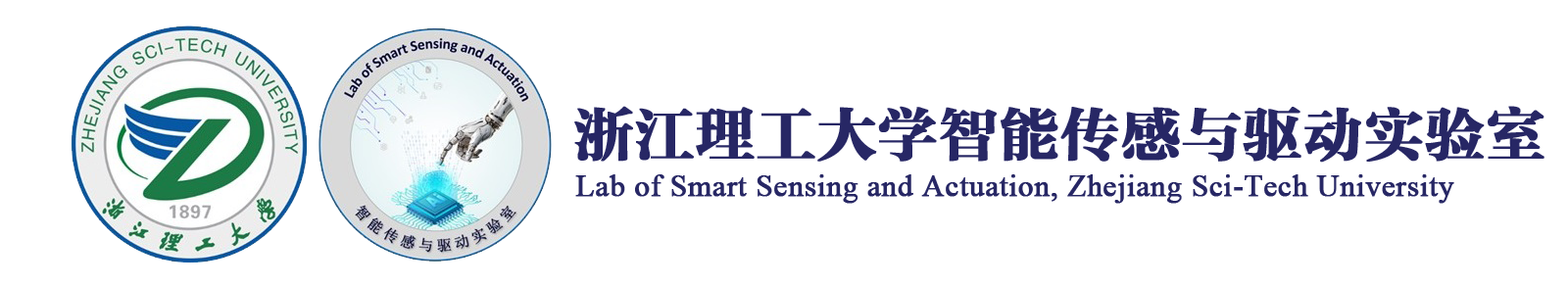
<style>
.page{position:relative;width:1568px;height:286px;background:#ffffff}
.page>*{position:absolute;margin:0}
.t1{font:59.2px "FZCYSK--GBK1-0";color:#272765;font-weight:bold}
.t2{font:30.6px "TimesNewRomanPSMT";color:#272765;font-weight:bold}
</style>
<div class="page">
<p class="t1" style="left:574px;top:106px;width:970px;height:57px">浙江理工大学智能传感与驱动实验室</p>
<p class="t2" style="left:575px;top:174px;width:879px;height:30px">Lab of Smart Sensing and Actuation, Zhejiang Sci-Tech University</p>
</div>
